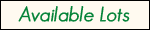
<style>
.page{position:relative;width:150px;height:30px;background:#fffaf0}
.page>*{position:absolute;margin:0}
.t1{font:20px "GeosansLight-Oblique";color:#008135;font-weight:bold}
</style>
<div class="page">
<p class="t1" style="left:18px;top:6px;width:112px;height:16px">Available Lots</p>
</div>
